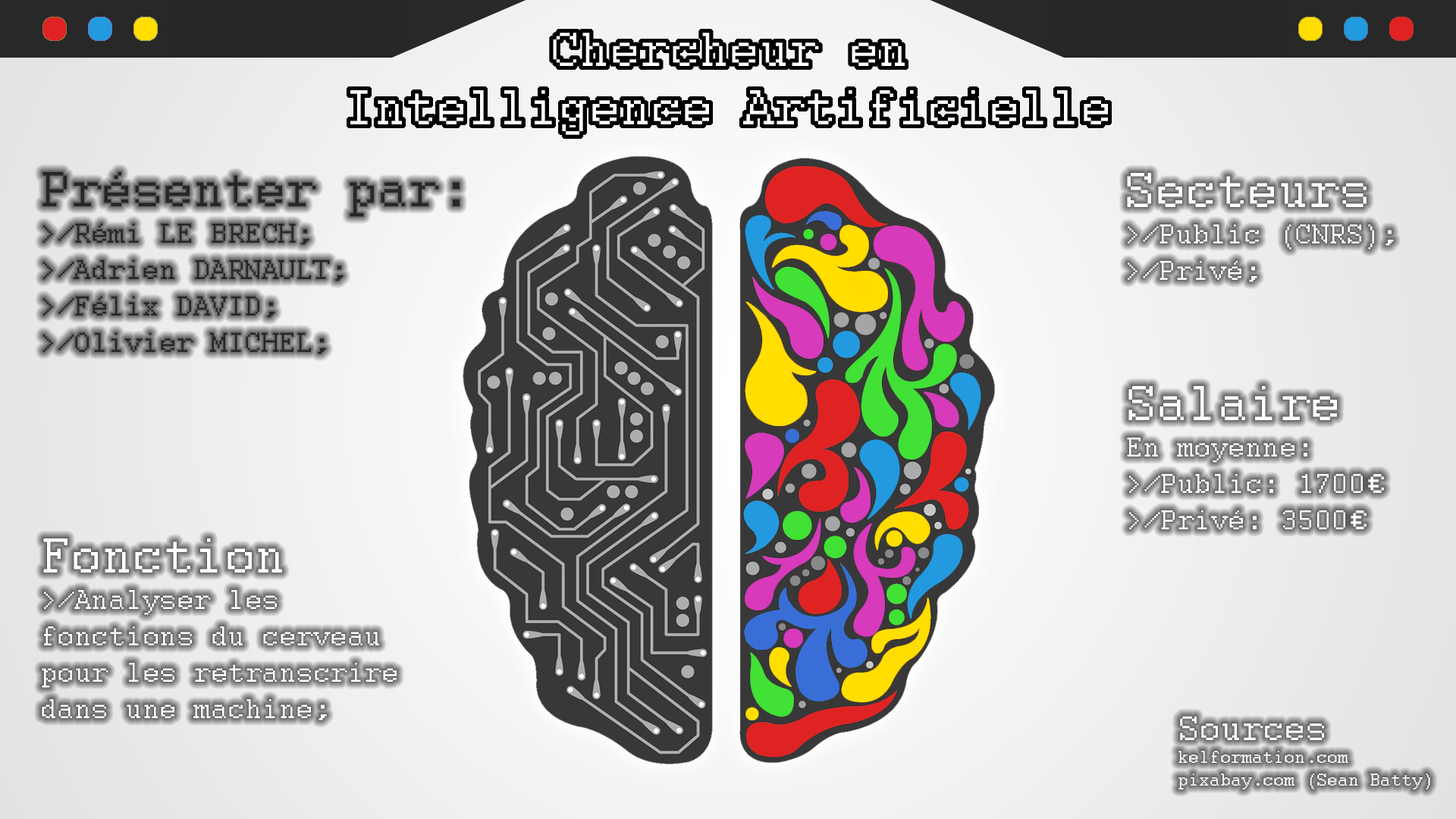
<style>
.page{position:relative;width:1456px;height:819px}
.page>*{position:absolute;margin:0}
.t1{font:30.3px "Courier";color:#272727}
.t2{font:54.6px "Courier";color:#272727}
.t3{font:30.3px "Courier";color:#ffffff}
.t4{font:54.6px "Courier";color:#ffffff}
.t5{font:19px "Courier";color:#ffffff}
.t6{font:37.9px "Courier";color:#ffffff}
</style>
<div class="page">
<p class="t1" style="left:42px;top:172px;width:418px;height:182px"><span class="t2">Présenter par:<br></span>&gt;/Rémi LE BRECH;<br>&gt;/Adrien DARNAULT;<br>&gt;/Félix DAVID;<br>&gt;/Olivier MICHEL;</p>
<p class="t3" style="left:1127px;top:173px;width:267px;height:109px"><span class="t4">Secteurs<br></span>&gt;/Public (CNRS);<br>&gt;/Privé;</p>
<p class="t3" style="left:1127px;top:386px;width:236px;height:143px"><span class="t4">Salaire<br></span>En moyenne:<br>&gt;/Public: 1700<br>&gt;/Privé: 3500</p>
<p class="t5" style="left:1178px;top:716px;width:252px;height:73px"><span class="t6">Sources<br></span>kelformation.com<br>pixabay.com (Sean Batty)</p>
</div>
